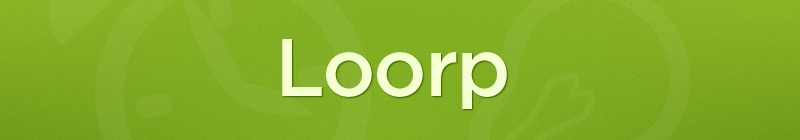
<style>
.page{position:relative;width:800px;height:140px}
.page>*{position:absolute;margin:0}
.t1{font:81.2px "Gotham-Medium";letter-spacing:-0.025em;color:#f6ffd8}
</style>
<div class="page">
<p class="t1" style="left:282px;top:39px;width:225px;height:70px">Loorp</p>
</div>
